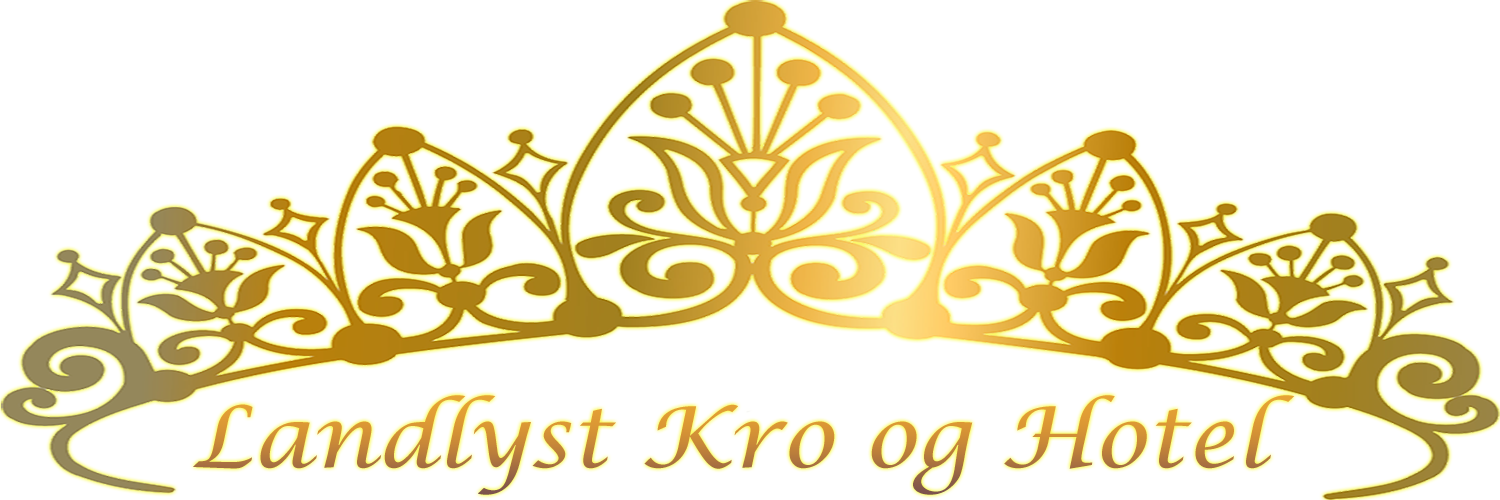
<style>
.page{position:relative;width:1500px;height:500px;background:#ffffff}
.page>*{position:absolute;margin:0}
.t1{font:84.3px "LucidaCalligraphy-Italic";scale:1.07 1}
</style>
<div class="page">
<p class="t1" style="left:193px;top:395px;width:1102px;height:100px">Landlyst Kro og Hotel</p>
</div>
